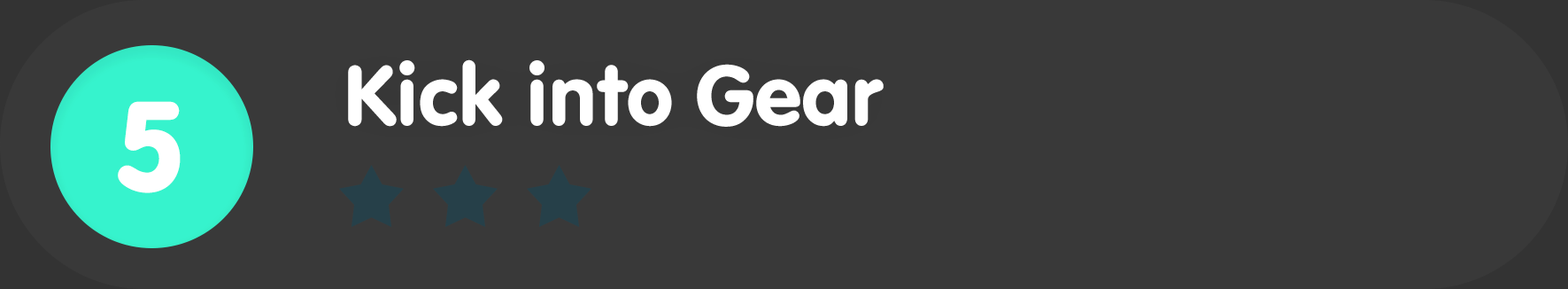
<style>
.page{position:relative;width:1568px;height:289px;background:#393939}
.page>*{position:absolute;margin:0}
.t1{font:88.5px "VAGRundschriftD";color:#ffffff}
.t2{font:132.8px "VAGRundschriftD";color:#ffffff}
</style>
<div class="page">
<p class="t1" style="left:348px;top:59px;width:536px;height:68px">Kick into Gear</p>
<p class="t2" style="left:118px;top:101px;width:63px;height:92px">5</p>
</div>
